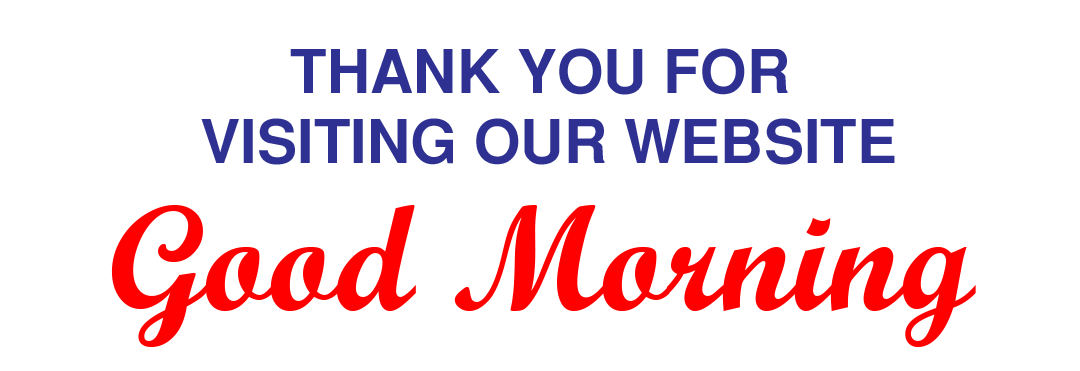
<style>
.page{position:relative;width:1080px;height:371px;background:#ffffff}
.page>*{position:absolute;margin:0}
.t1{font:60px/150px "SansSerifBold";color:#2e3192}
.t2{font:150px "ScriptMTBold";color:#ff0000}
</style>
<div class="page">
<p class="t1" style="left:201px;top:48px;width:694px;height:117px;text-align:center">THANK YOU FOR <br>VISITING OUR WEBSITE</p>
<p class="t2" style="left:111px;top:205px;width:865px;height:142px">Good Morning</p>
</div>
